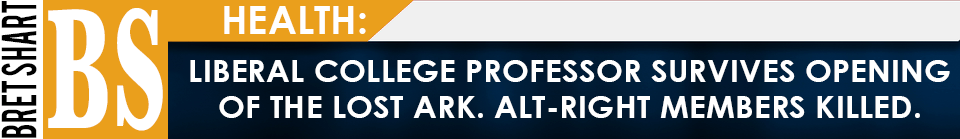
<style>
.page{position:relative;width:960px;height:139px}
.page>*{position:absolute;margin:0}
.t1{font:38.6px "Bebas";color:#000000;scale:0.73 1}
.t2{font:39px "CenturyGothic-Bold";color:#ffffff}
.t3{font:178.1px "Baskerville-Bold";color:#ffffff;scale:0.54 1}
.t4{font:30px "CenturyGothic-Bold";color:#ffffff;scale:1.08 1}
</style>
<div class="page">
<p class="t1" style="left:1px;top:1px;width:36px;height:137px;rotate:-90deg">BRET SHART</p>
<p class="t2" style="left:224px;top:6px;width:142px;height:28px">HEALTH:</p>
<p class="t3" style="left:48px;top:8px;width:115px;height:123px">BS</p>
<p class="t4" style="left:190px;top:60px;width:760px;height:58px;text-align:center">LIBERAL COLLEGE PROFESSOR SURVIVES OPENING<br>OF THE LOST ARK. ALT-RIGHT MEMBERS KILLED.</p>
</div>
